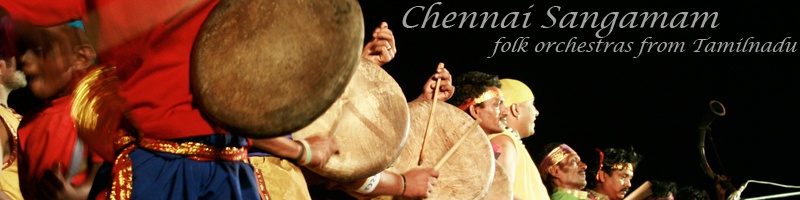
<style>
.page{position:relative;width:800px;height:200px}
.page>*{position:absolute;margin:0}
.t1{font:18px/8px "LucidaCalligraphy-Italic";color:#a1a2a1;font-style:italic}
.t2{font:30px/8px "LucidaCalligraphy-Italic";color:#a1a2a1;font-style:italic}
</style>
<div class="page">
<p class="t1" style="left:402px;top:2px;width:395px;height:56px"><span class="t2">  Chennai Sangamam<br><br><br></span>                   folk orchestras from Tamilnadu</p>
</div>
